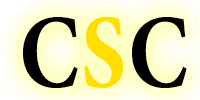
<style>
.page{position:relative;width:200px;height:100px}
.page>*{position:absolute;margin:0}
.t1{font:104.2px "Minion3-Bold";color:#000000;scale:0.85 1}
.t2{font:104.2px "Minion3-Bold";color:#ffde00;scale:0.85 1}
</style>
<div class="page">
<p class="t1" style="left:23px;top:16px;width:164px;height:73px">C<span class="t2">S</span>C</p>
</div>
